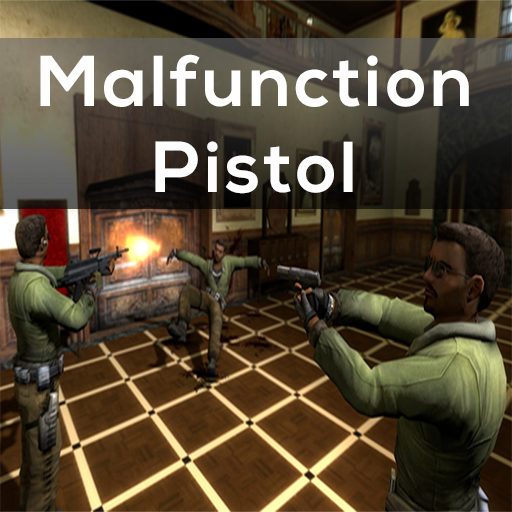
<style>
.page{position:relative;width:512px;height:512px}
.page>*{position:absolute;margin:0}
.t1{font:72px "NexaBold";letter-spacing:0.05em;color:#fefefe}
</style>
<div class="page">
<p class="t1" style="left:40px;top:54px;width:429px;height:140px;text-align:center">Malfunction<br>Pistol</p>
</div>
